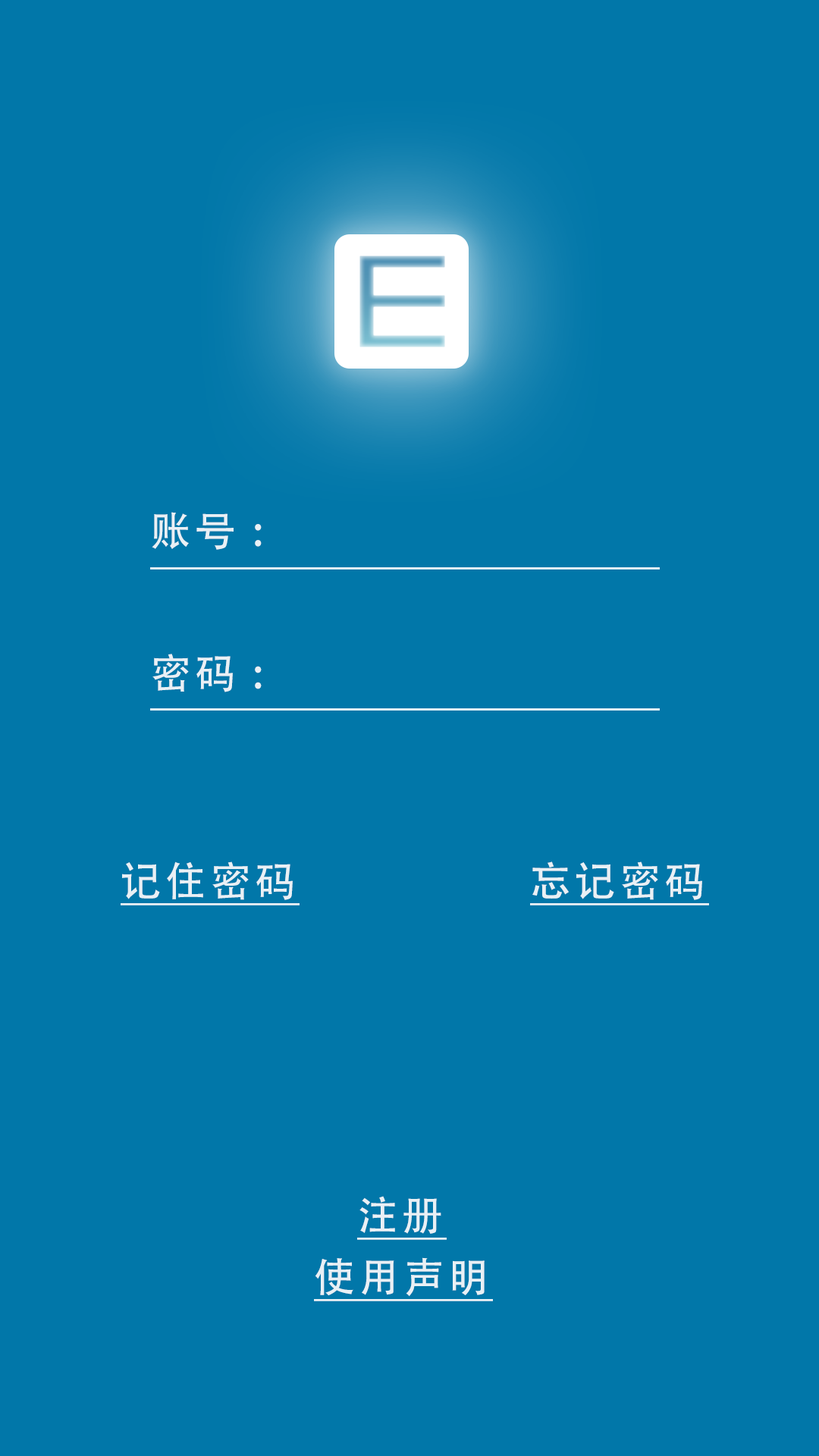
<style>
.page{position:relative;width:819px;height:1456px;background:#0177a9}
.page>*{position:absolute;margin:0}
.t1{font:40.7px "AdobeHeitiStd-Regular";letter-spacing:0.1em;color:#ffffff}
.t2{font:40.7px "AdobeHeitiStd-Regular";letter-spacing:0.1em;color:#ffffff;text-decoration:underline}
</style>
<div class="page">
<p class="t1" style="left:152px;top:512px;width:110px;height:180px;opacity:0.87">账号 : <br><br>密码 :</p>
<p class="t2" style="left:121px;top:861px;width:179px;height:44px;opacity:0.87">记住密码</p>
<p class="t2" style="left:530px;top:861px;width:179px;height:44px;opacity:0.87">忘记密码</p>
<p class="t2" style="left:357px;top:1196px;width:90px;height:44px;opacity:0.87">注册</p>
<p class="t2" style="left:314px;top:1257px;width:179px;height:44px;opacity:0.87">使用声明</p>
</div>
